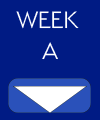
<style>
.page{position:relative;width:100px;height:120px;background:#001b84}
.page>*{position:absolute;margin:0}
.t1{font:26.4px "Serenity-Light";color:#ffffff}
</style>
<div class="page">
<p class="t1" style="left:16px;top:11px;width:63px;height:49px;text-align:center">WEEK <br>A</p>
</div>
